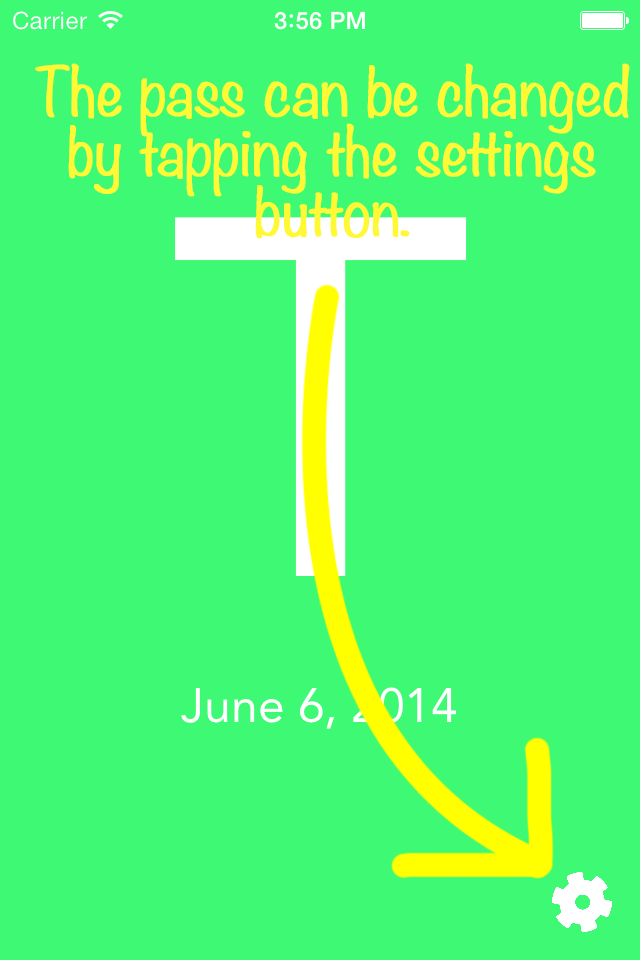
<style>
.page{position:relative;width:640px;height:960px;background:#3df973}
.page>*{position:absolute;margin:0}
.t1{font:60px/60px "Noteworthy-Light";letter-spacing:-0.01em;color:#fff835;font-weight:bold}
</style>
<div class="page">
<p class="t1" style="left:35px;top:63px;width:595px;height:176px;text-align:center">The pass can be changed<br>by tapping the settings<br>button.</p>
</div>
